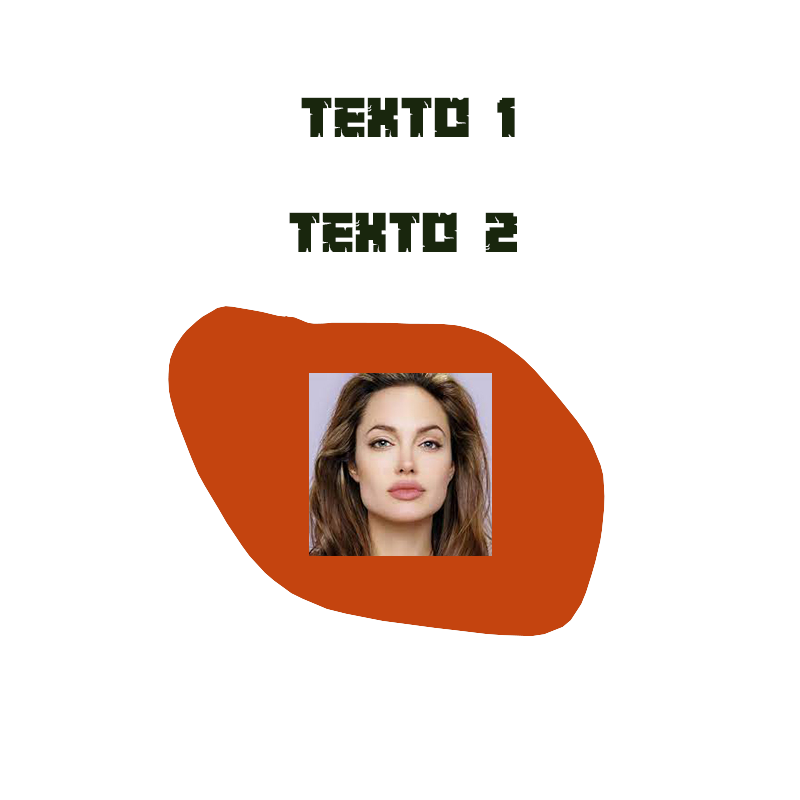
<style>
.page{position:relative;width:800px;height:800px;background:#ffffff}
.page>*{position:absolute;margin:0}
.t1{font:50px "MinecrafterAlt";color:#19260d}
</style>
<div class="page">
<p class="t1" style="left:301px;top:97px;width:214px;height:40px">Texto 1</p>
<p class="t1" style="left:289px;top:212px;width:228px;height:40px">Texto 2</p>
</div>
